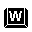
<style>
.page{position:relative;width:32px;height:32px;background:#ffffff}
.page>*{position:absolute;margin:0}
.t1{font:14px "Arial-BoldMT";color:#ffffff}
</style>
<div class="page">
<p class="t1" style="left:9px;top:11px;width:13px;height:10px">W</p>
</div>
